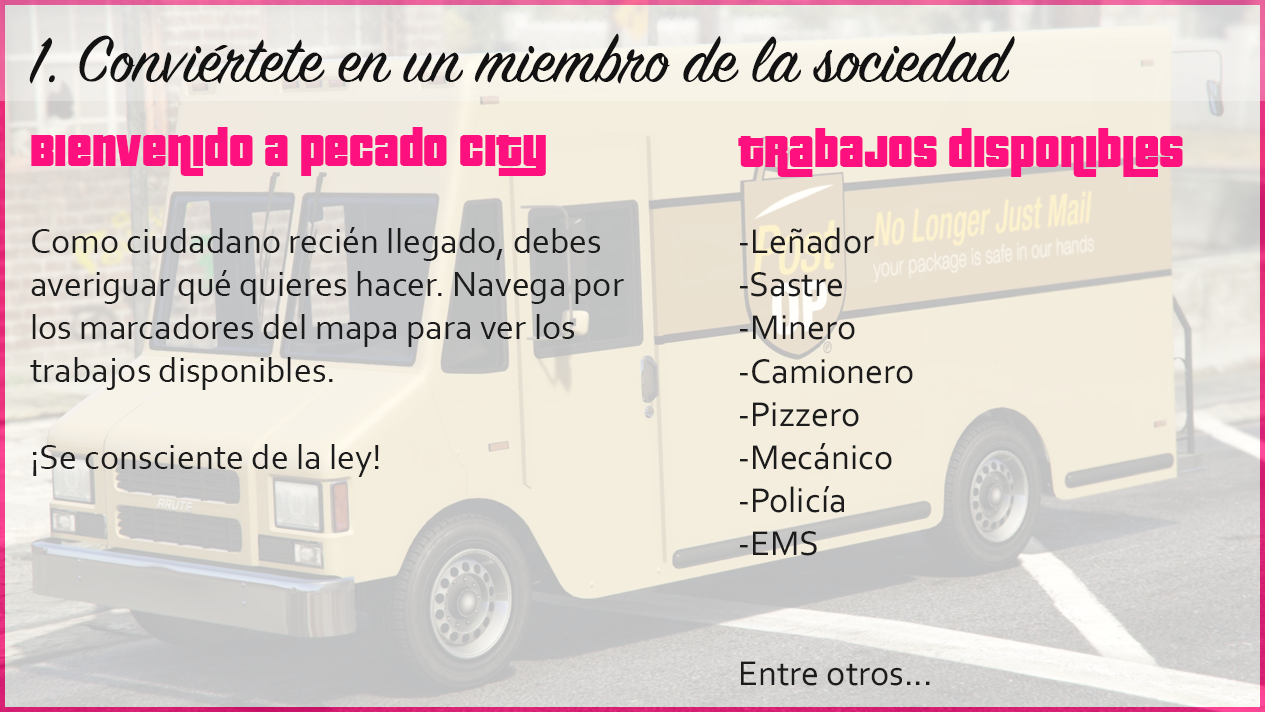
<style>
.page{position:relative;width:1265px;height:712px}
.page>*{position:absolute;margin:0}
.t1{font:72px "SignPainter-HouseScript";color:#121212}
.t2{font:36px "Corbel";color:#1c1c1c}
.t3{font:48px "PricedownBl-Regular";color:#ff107f}
</style>
<div class="page">
<p class="t1" style="left:29px;top:33px;width:986px;height:51px">1. Conviértete en un miembro de la sociedad</p>
<p class="t2" style="left:30px;top:127px;width:594px;height:350px"><span class="t3">Bienvenido a pecado city<br></span><br>Como ciudadano recién llegado, debes averiguar qué quieres hacer. Navega por los marcadores del mapa para ver los trabajos disponibles.<br><br>¡Se consciente de la ley!</p>
<p class="t2" style="left:738px;top:128px;width:445px;height:558px"><span class="t3">Trabajos disponibles<br></span><br>-Leñador<br>-Sastre<br>-Minero<br>-Camionero<br>-Pizzero<br>-Mecánico<br>-Policía<br>-EMS<br><br><br>Entre otros...</p>
</div>
